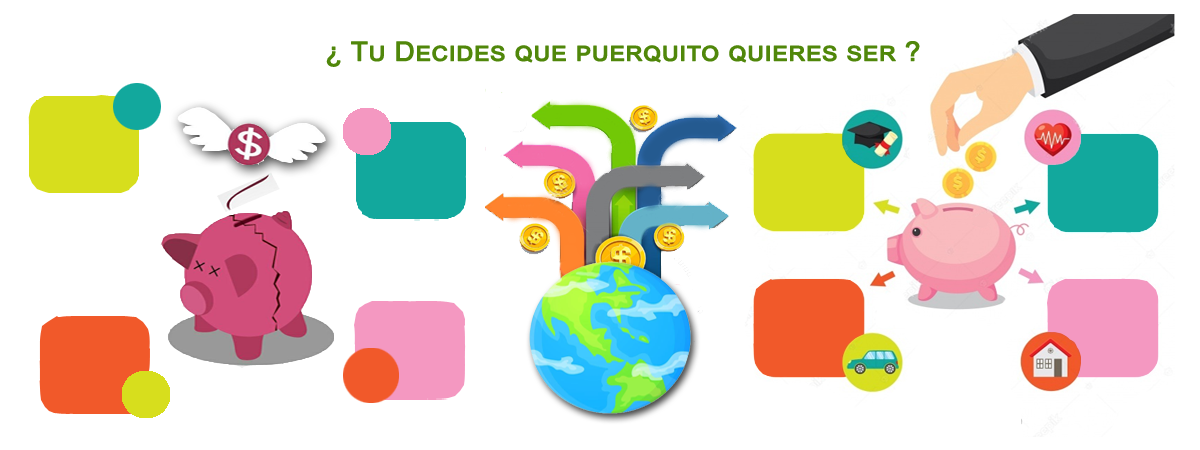
<style>
.page{position:relative;width:1200px;height:450px;background:#ffffff}
.page>*{position:absolute;margin:0}
.t1{font:26.7px "ArialMT";color:#50870a;font-variant:small-caps;font-weight:bold;scale:1.04 1}
</style>
<div class="page">
<p class="t1" style="left:326px;top:41px;width:594px;height:26px">¿ Tu Decides que puerquito quieres ser ?</p>
</div>
